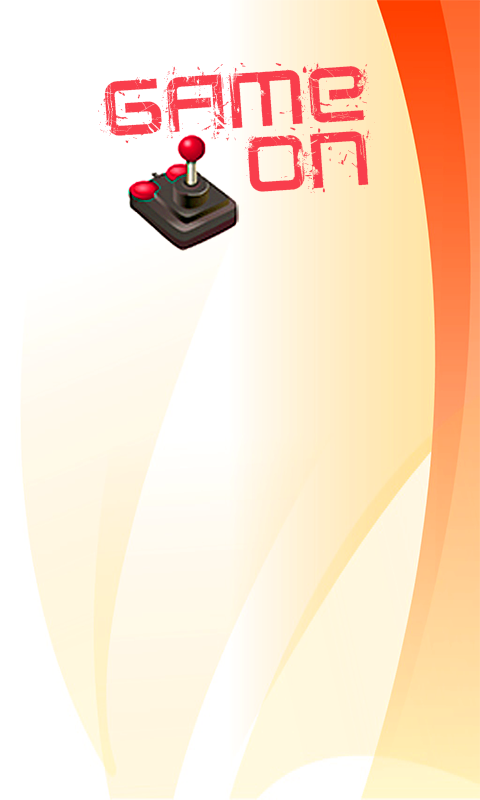
<style>
.page{position:relative;width:480px;height:800px;background:#ffffff}
.page>*{position:absolute;margin:0}
.t1{font:54.2px "CRUSHED";color:#f93e4c}
</style>
<div class="page">
<p class="t1" style="left:98px;top:62px;width:277px;height:131px;rotate:-4deg">Game<br>On</p>
</div>
